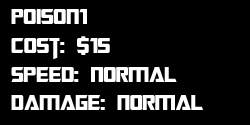
<style>
.page{position:relative;width:250px;height:125px;background:#000000}
.page>*{position:absolute;margin:0}
.t1{font:24px "TransformersMovie";color:#ffffff}
</style>
<div class="page">
<p class="t1" style="left:11px;top:9px;width:192px;height:101px">Poison1<br>Cost: $15<br>Speed: Normal<br>Damage: Normal</p>
</div>
